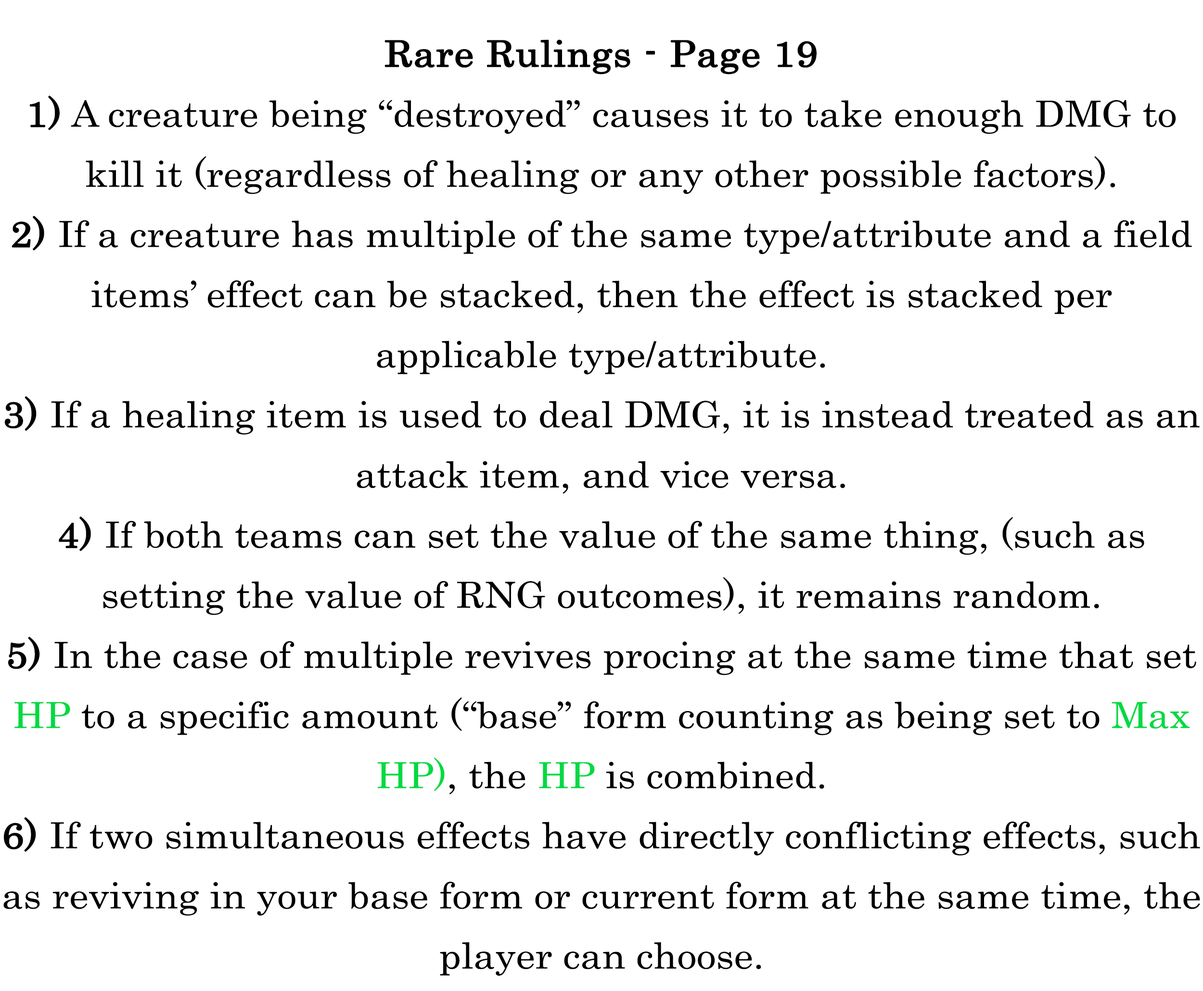
<style>
.page{position:relative;width:1203px;height:991px;background:#ffffff}
.page>*{position:absolute;margin:0}
.t1{font:61.9px/60.1px "Century";color:#000000;scale:1.07 1}
.t2{font:61.9px/60.1px "Century";color:#000000;font-weight:bold;scale:1.07 1}
.t3{font:61.9px/55.7px "Century";color:#000000;font-weight:bold;scale:1.07 1}
.t4{font:61.9px/60.1px "Century";color:#00d942;scale:1.07 1}
</style>
<div class="page">
<p class="t1" style="left:3px;top:39px;width:1197px;height:937px;text-align:center"><span class="t2">Rare Rulings - Page 19<br></span><span class="t3">1)</span> A creature being “destroyed” causes it to take enough DMG to kill it (regardless of healing or any other possible factors).<br><span class="t3">2)</span> If a creature has multiple of the same type/attribute and a field items’ effect can be stacked, then the effect is stacked per applicable type/attribute.<br><span class="t3">3)</span> If a healing item is used to deal DMG, it is instead treated as an attack item, and vice versa.<br><span class="t3">4)</span> If both teams can set the value of the same thing, (such as setting the value of RNG outcomes), it remains random.<br><span class="t3">5)</span> In the case of multiple revives procing at the same time that set  <span class="t4">HP</span> to a specific amount (“base” form counting as being set to <span class="t4">Max HP)</span>, the <span class="t4">HP</span> is combined.<br><span class="t3">6)</span> If two simultaneous effects have directly conflicting effects, such as reviving in your base form or current form at the same time, the player can choose.</p>
</div>
